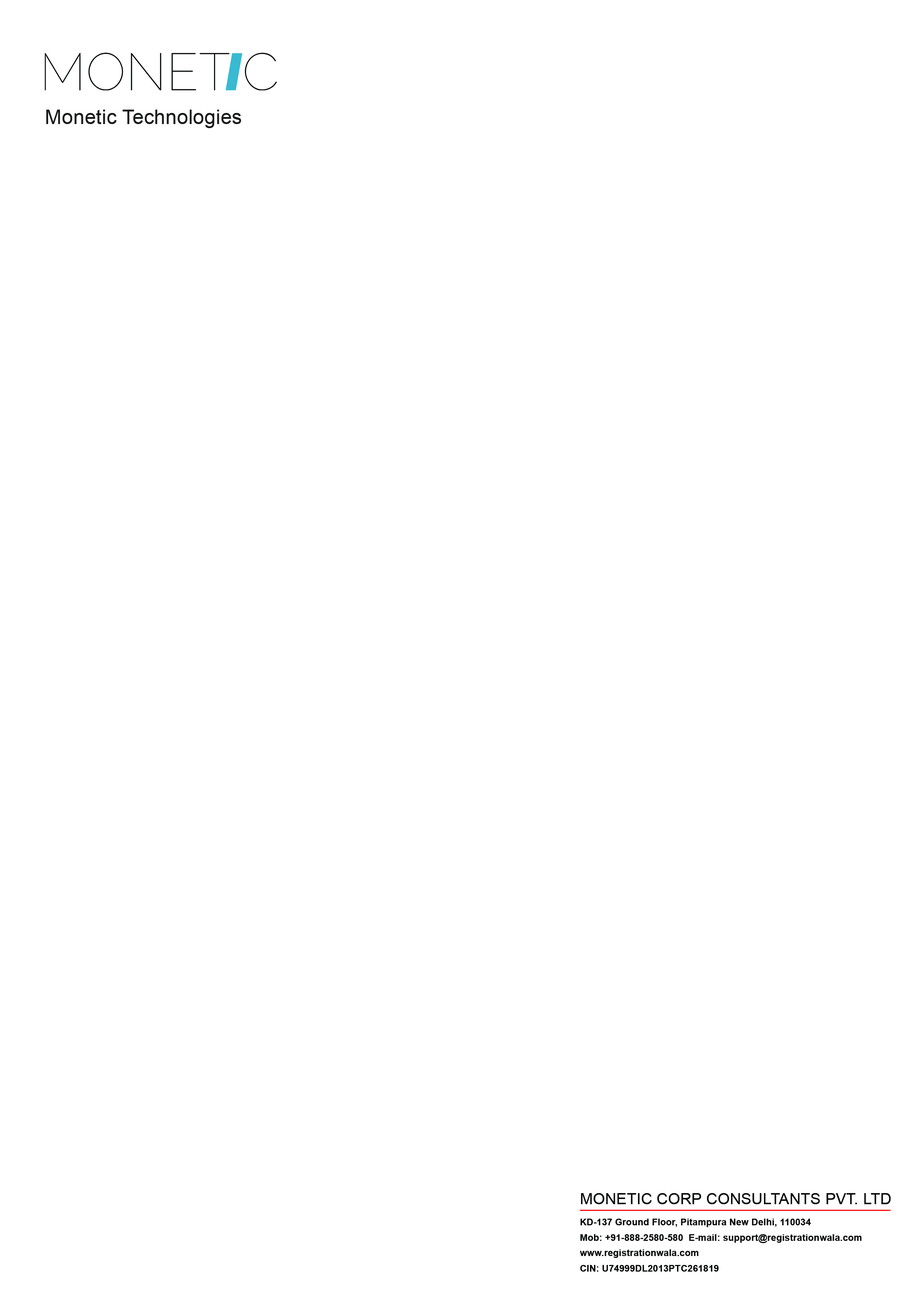
<style>
.page{position:relative;width:918px;height:1299px;background:#ffffff}
.page>*{position:absolute;margin:0}
.t1{font:20.1px "ArialMT";letter-spacing:0.012em;color:#171a19}
.t2{font:15.5px "ArialMT";letter-spacing:0.012em;color:#000000;text-transform:uppercase}
.t3{font:9.3px/15.4px "Arial-BoldMT";letter-spacing:0.012em;color:#060808}
</style>
<div class="page">
<p class="t1" style="left:46px;top:110px;width:195px;height:18px">Monetic Technologies</p>
<p class="t2" style="left:581px;top:1193px;width:310px;height:11px">Monetic Corp Consultants PVT. LTD</p>
<p class="t3" style="left:580px;top:1219px;width:282px;height:53px">KD-137 Ground Floor, Pitampura New Delhi, 110034<br>Mob: +91-888-2580-580  E-mail: support@registrationwala.com<br>www.registrationwala.com<br>CIN: U74999DL2013PTC261819</p>
</div>
